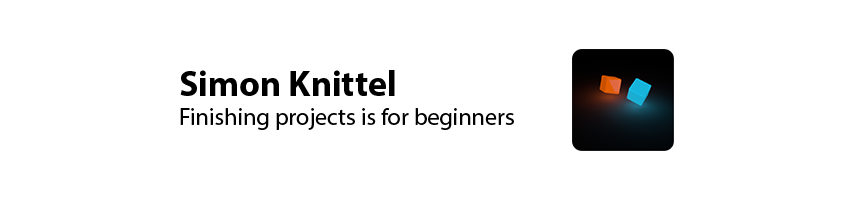
<style>
.page{position:relative;width:854px;height:200px;background:#ffffff}
.page>*{position:absolute;margin:0}
.t1{font:24px "MyriadPro-Regular";color:#000000}
.t2{font:36px "MyriadPro-Bold";color:#000000}
</style>
<div class="page">
<p class="t1" style="left:180px;top:70px;width:334px;height:60px"><span class="t2">Simon Knittel<br></span>Finishing projects is for beginners</p>
</div>
